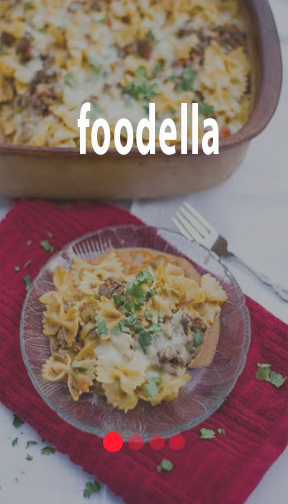
<style>
.page{position:relative;width:288px;height:504px}
.page>*{position:absolute;margin:0}
.t1{font:71.8px "MyriadPro-Bold";letter-spacing:0.025em;color:#fbfbfc;scale:0.52 1}
</style>
<div class="page">
<p class="t1" style="left:77px;top:102px;width:142px;height:53px">foodella</p>
</div>
